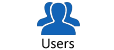
<style>
.page{position:relative;width:114px;height:50px;background:#ffffff}
.page>*{position:absolute;margin:0}
.t1{font:14.5px "Calibri";color:#000000;scale:1.03 1}
</style>
<div class="page">
<p class="t1" style="left:42px;top:38px;width:32px;height:11px">Users</p>
</div>
